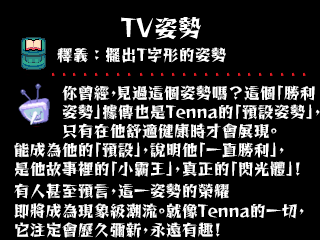
<style>
.page{position:relative;width:320px;height:240px;background:#000000}
.page>*{position:absolute;margin:0}
.t1{font:24px "Tiejili";color:#ffffff}
.t2{font:16px "Tiejili";color:#ffffff}
.t3{font:16px "Tiejili";letter-spacing:-0.1em;color:#ffffff}
.t4{font:16px "Reggae";color:#ffffff}
.t5{font:16px/22px "Tiejili";color:#ffffff}
.t6{font:16px/22px "Reggae";color:#ffffff}
</style>
<div class="page">
<p class="t1" style="left:121px;top:17px;width:80px;height:23px">TV姿勢</p>
<p class="t2" style="left:57px;top:47px;width:169px;height:16px">釋義︓擺出T字形的姿勢</p>
<p class="t2" style="left:14px;top:85px;width:306px;height:153px">你曾經<span class="t3">︐</span>見過<span class="t4">這</span>個姿勢<span class="t4">嗎</span>︖<span class="t4">這</span>個「勝利<br>　　　姿勢」據傳也是Tenna的「預設姿勢」︐<br>　　　只有在他舒適健康時才會展現。<br>能成為他的「預設」︐<span class="t4">說</span>明他「一直勝利」︐<br>是他故事裡的「小霸王」︐真正的「閃光體」︕<br><span class="t5">有人</span><span class="t6">甚</span><span class="t5">至預</span><span class="t6">言</span><span class="t5">︐</span><span class="t6">這</span><span class="t5">一姿勢的榮耀<br></span>即將成為現<span class="t4">象級</span>潮流。就<span class="t4">像</span>Tenna的一切︐<br>它<span class="t4">注</span>定會<span class="t4">歷</span>久彌<span class="t4">新</span>︐永遠有趣︕</p>
</div>
